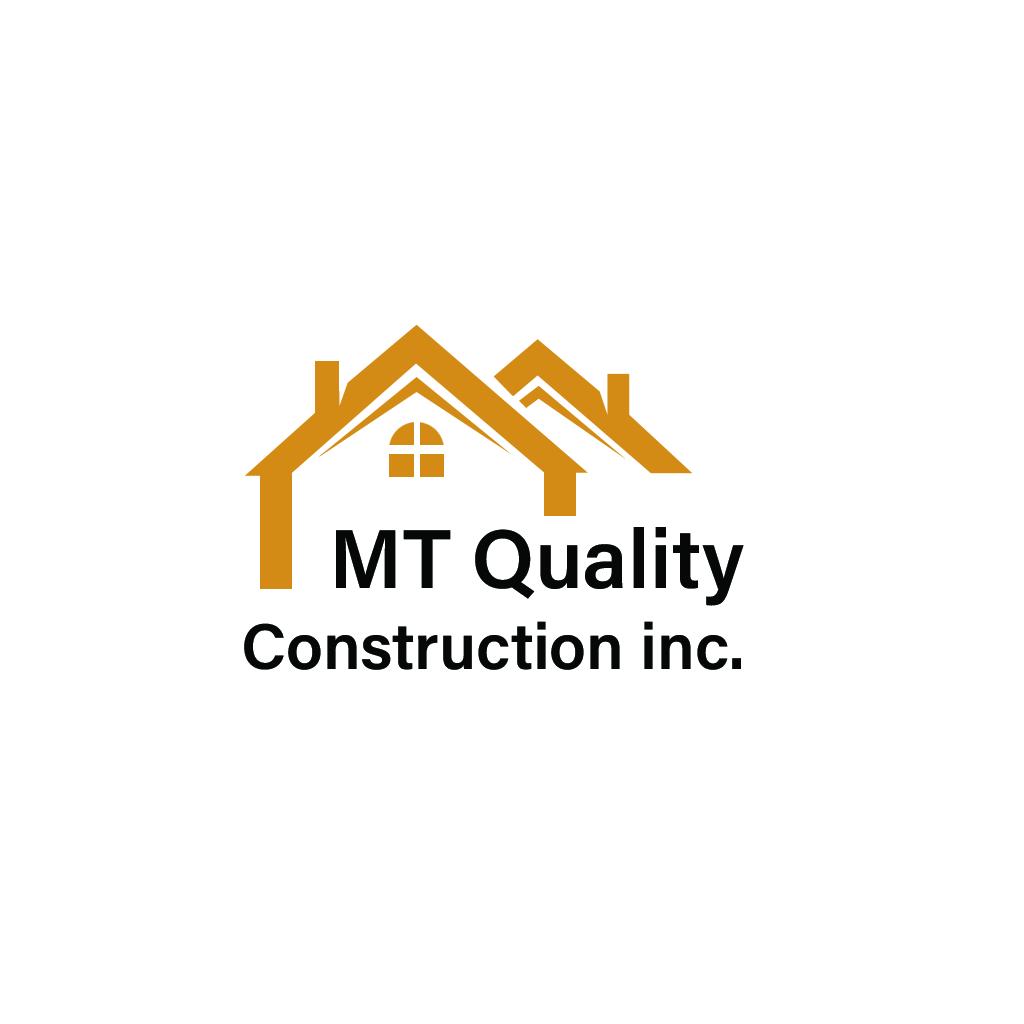
<style>
.page{position:relative;width:1024px;height:1024px;background:#ffffff}
.page>*{position:absolute;margin:0}
.t1{font:83.3px "AcuminConcept-Semibold";color:#060808}
.t2{font:64.7px "AcuminConcept-Semibold";color:#060808}
</style>
<div class="page">
<p class="t1" style="left:336px;top:527px;width:408px;height:79px">MT Quality</p>
<p class="t2" style="left:244px;top:621px;width:497px;height:49px">Construction inc.</p>
</div>
